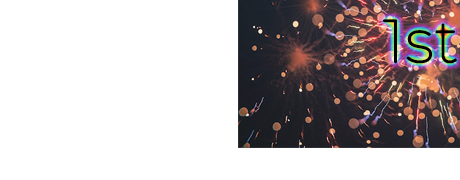
<style>
.page{position:relative;width:460px;height:180px;background:#ffffff}
.page>*{position:absolute;margin:0}
.t1{font:60px "Montserrat-Thin";color:#000000;font-weight:bold}
</style>
<div class="page">
<p class="t1" style="left:383px;top:19px;width:75px;height:45px">1st</p>
</div>
